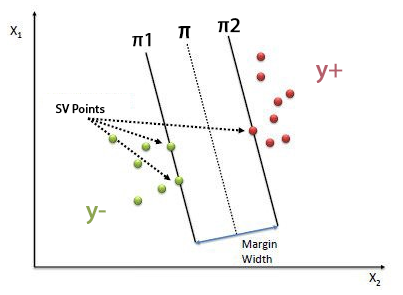
<style>
.page{position:relative;width:403px;height:295px;background:#ffffff}
.page>*{position:absolute;margin:0}
.t1{font:23.6px "MyriadPro-Regular";color:#000000;font-weight:bold}
.t2{font:21.2px "MyriadPro-Regular";color:#000000;font-weight:bold}
.t3{font:20.1px "MyriadPro-Regular";color:#000000;font-weight:bold}
.t4{font:25px "MyriadPro-Regular";color:#b55f6c;font-weight:bold}
.t5{font:12px "MyriadPro-Regular";color:#000000;font-weight:bold}
.t6{font:25px "MyriadPro-Regular";color:#8da551;font-weight:bold}
</style>
<div class="page">
<p class="t1" style="left:178px;top:26px;width:13px;height:13px">π</p>
<p class="t2" style="left:217px;top:18px;width:23px;height:15px">π2</p>
<p class="t3" style="left:132px;top:33px;width:19px;height:14px">π1</p>
<p class="t4" style="left:316px;top:63px;width:27px;height:20px">y+</p>
<p class="t5" style="left:55px;top:104px;width:50px;height:10px">SV Points</p>
<p class="t6" style="left:86px;top:206px;width:20px;height:18px">y-</p>
</div>
